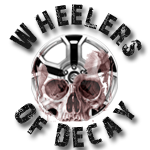
<style>
.page{position:relative;width:150px;height:150px;background:#ffffff}
.page>*{position:absolute;margin:0}
.t1{font:30px "28DaysLater";color:#1e1e1e}
</style>
<div class="page">
<p class="t1" style="left:9px;top:4px;width:133px;height:53px">Wheelers</p>
<p class="t1" style="left:14px;top:100px;width:121px;height:48px">Of Decay</p>
</div>
